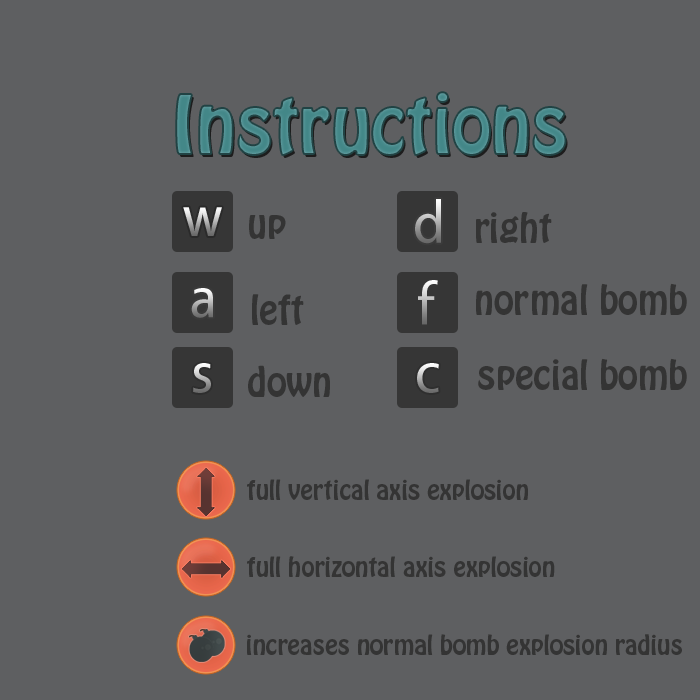
<style>
.page{position:relative;width:700px;height:700px;background:#5e5f61}
.page>*{position:absolute;margin:0}
.t1{font:72px "HoboStd";color:#438788}
.t2{font:36px "HoboStd";color:#343434}
.t3{font:24px "HoboStd";color:#343434}
</style>
<div class="page">
<p class="t1" style="left:176px;top:92px;width:390px;height:63px">Instructions</p>
<p class="t2" style="left:249px;top:215px;width:37px;height:24px">up</p>
<p class="t2" style="left:476px;top:212px;width:76px;height:31px">right</p>
<p class="t2" style="left:252px;top:294px;width:52px;height:31px">left</p>
<p class="t2" style="left:476px;top:283px;width:211px;height:32px">normal bomb</p>
<p class="t2" style="left:248px;top:365px;width:82px;height:32px">down</p>
<p class="t2" style="left:478px;top:358px;width:209px;height:32px">special bomb</p>
<p class="t3" style="left:247px;top:479px;width:281px;height:21px">full vertical axis explosion</p>
<p class="t3" style="left:247px;top:556px;width:308px;height:21px">full horizontal axis explosion</p>
<p class="t3" style="left:247px;top:634px;width:435px;height:21px">increases normal bomb explosion radius</p>
</div>
